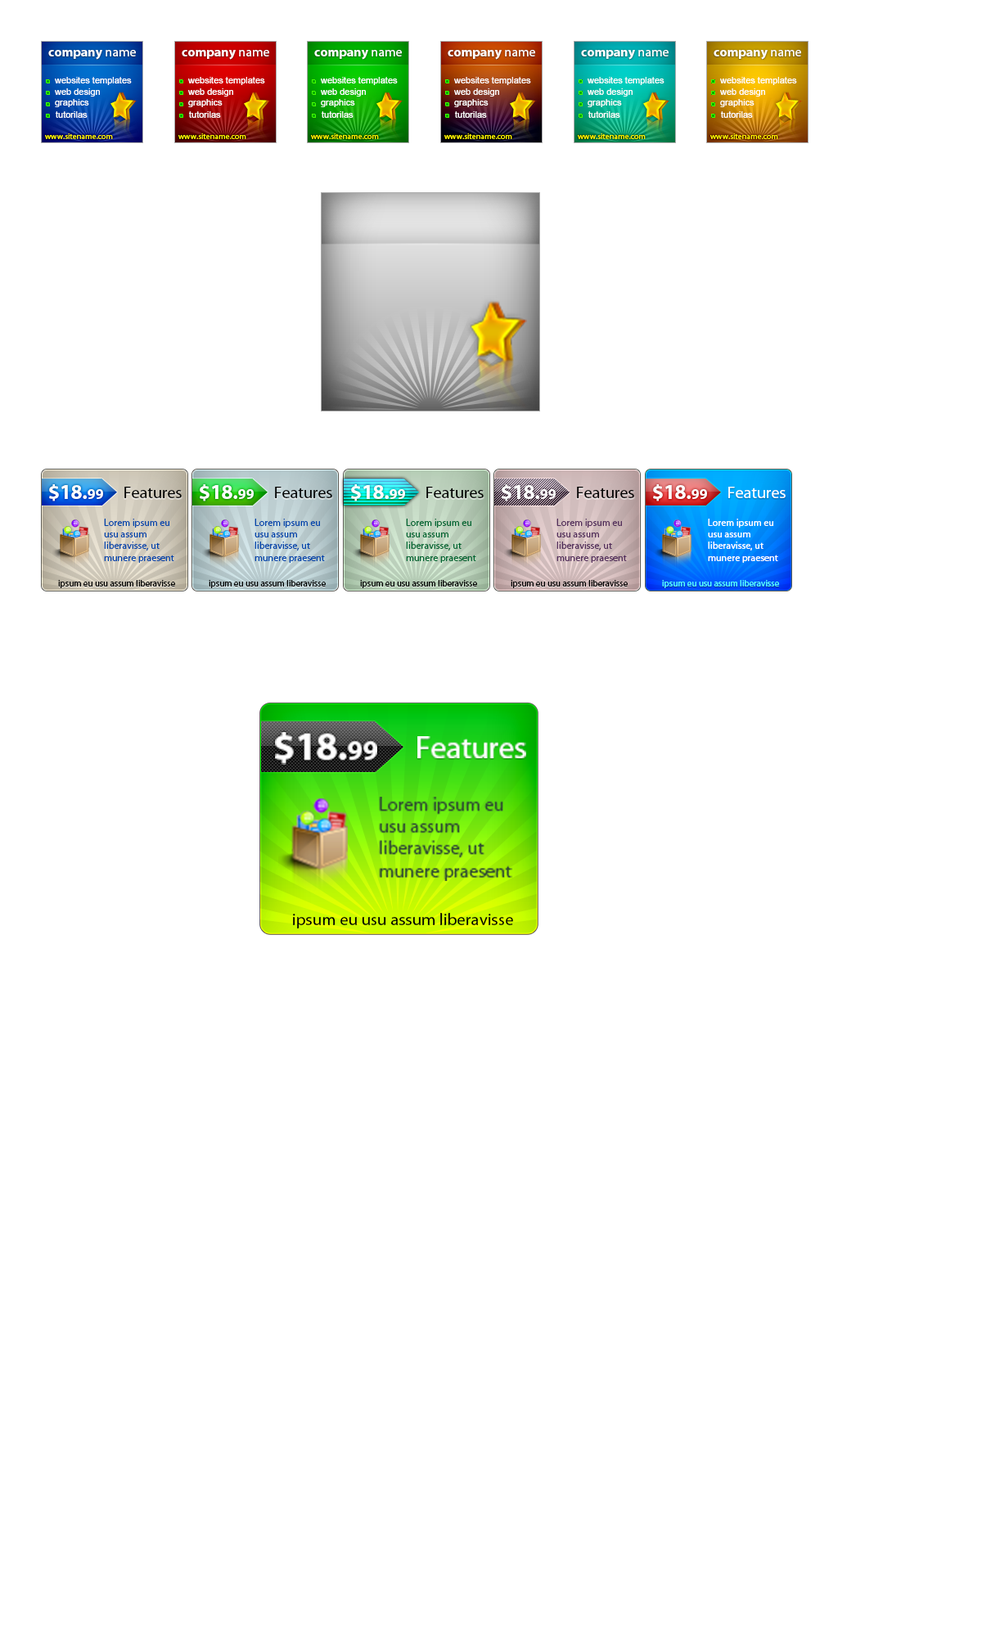
<style>
.page{position:relative;width:982px;height:1636px;background:#ffffff}
.page>*{position:absolute;margin:0}
.t1{font:13.1px "MyriadPro-Bold";color:#ffffff}
.t2{font:13.1px "MyriadPro-Regular";color:#ffffff}
.t3{font:9px "ArialMT";color:#ffffff}
.t4{font:8.2px "MyriadPro-Regular";color:#fff600}
.t5{font:20.5px "MyriadPro-Bold";color:#fefefe}
.t6{font:14.7px "MyriadPro-Bold";color:#fefefe}
.t7{font:16.4px "MyriadPro-Regular";color:#000000}
.t8{font:16.4px "MyriadPro-Regular";color:#ffffff}
.t9{font:9.8px "MyriadPro-Regular";color:#0145ab}
.t10{font:9.8px "MyriadPro-Regular";color:#006632}
.t11{font:9.8px "MyriadPro-Regular";color:#542f5c}
.t12{font:9.8px "MyriadPro-Regular";color:#ffffff}
.t13{font:9px "MyriadPro-Regular";color:#010101}
.t14{font:9px "MyriadPro-Regular";color:#56fdff}
.t15{font:38.7px "MyriadPro-Bold";color:#fefefe}
.t16{font:27.9px "MyriadPro-Bold";color:#fefefe}
.t17{font:31px "MyriadPro-Regular";color:#ffffff}
.t18{font:18.6px "MyriadPro-Regular";color:#2f4b2f}
.t19{font:17px "MyriadPro-Regular";color:#000000}
</style>
<div class="page">
<p class="t1" style="left:48px;top:50px;width:88px;height:10px">company<span class="t2"> name</span></p>
<p class="t1" style="left:182px;top:50px;width:87px;height:10px">company<span class="t2"> name</span></p>
<p class="t1" style="left:314px;top:50px;width:88px;height:10px">company<span class="t2"> name</span></p>
<p class="t1" style="left:448px;top:50px;width:87px;height:10px">company<span class="t2"> name</span></p>
<p class="t1" style="left:581px;top:50px;width:87px;height:10px">company<span class="t2"> name</span></p>
<p class="t1" style="left:713px;top:50px;width:88px;height:10px">company<span class="t2"> name</span></p>
<p class="t3" style="left:55px;top:77px;width:77px;height:8px">websites templates</p>
<p class="t3" style="left:188px;top:77px;width:77px;height:8px">websites templates</p>
<p class="t3" style="left:321px;top:77px;width:77px;height:8px">websites templates</p>
<p class="t3" style="left:454px;top:77px;width:77px;height:8px">websites templates</p>
<p class="t3" style="left:587px;top:77px;width:77px;height:8px">websites templates</p>
<p class="t3" style="left:720px;top:77px;width:77px;height:8px">websites templates</p>
<p class="t3" style="left:55px;top:88px;width:45px;height:9px">web design</p>
<p class="t3" style="left:188px;top:88px;width:45px;height:9px">web design</p>
<p class="t3" style="left:321px;top:88px;width:45px;height:9px">web design</p>
<p class="t3" style="left:454px;top:88px;width:45px;height:9px">web design</p>
<p class="t3" style="left:587px;top:88px;width:45px;height:9px">web design</p>
<p class="t3" style="left:720px;top:88px;width:45px;height:9px">web design</p>
<p class="t3" style="left:55px;top:99px;width:34px;height:8px">graphics</p>
<p class="t3" style="left:188px;top:99px;width:35px;height:8px">graphics</p>
<p class="t3" style="left:321px;top:99px;width:34px;height:8px">graphics</p>
<p class="t3" style="left:454px;top:99px;width:34px;height:8px">graphics</p>
<p class="t3" style="left:587px;top:99px;width:35px;height:8px">graphics</p>
<p class="t3" style="left:720px;top:99px;width:34px;height:8px">graphics</p>
<p class="t3" style="left:56px;top:111px;width:32px;height:7px">tutorilas</p>
<p class="t3" style="left:189px;top:111px;width:32px;height:7px">tutorilas</p>
<p class="t3" style="left:322px;top:111px;width:31px;height:7px">tutorilas</p>
<p class="t3" style="left:455px;top:111px;width:32px;height:7px">tutorilas</p>
<p class="t3" style="left:588px;top:111px;width:32px;height:7px">tutorilas</p>
<p class="t3" style="left:721px;top:111px;width:32px;height:7px">tutorilas</p>
<p class="t4" style="left:45px;top:133px;width:68px;height:6px">www.sitename.com</p>
<p class="t4" style="left:178px;top:133px;width:68px;height:6px">www.sitename.com</p>
<p class="t4" style="left:311px;top:133px;width:68px;height:6px">www.sitename.com</p>
<p class="t4" style="left:444px;top:133px;width:68px;height:6px">www.sitename.com</p>
<p class="t4" style="left:578px;top:133px;width:68px;height:6px">www.sitename.com</p>
<p class="t4" style="left:710px;top:133px;width:68px;height:6px">www.sitename.com</p>
<p class="t5" style="left:49px;top:484px;width:54px;height:18px">$18.<span class="t6">99</span></p>
<p class="t5" style="left:200px;top:484px;width:54px;height:18px">$18.<span class="t6">99</span></p>
<p class="t5" style="left:351px;top:484px;width:54px;height:18px">$18.<span class="t6">99</span></p>
<p class="t5" style="left:502px;top:484px;width:54px;height:18px">$18.<span class="t6">99</span></p>
<p class="t5" style="left:653px;top:484px;width:54px;height:18px">$18.<span class="t6">99</span></p>
<p class="t7" style="left:124px;top:487px;width:58px;height:11px">Features</p>
<p class="t7" style="left:275px;top:487px;width:57px;height:11px">Features</p>
<p class="t7" style="left:426px;top:487px;width:58px;height:11px">Features</p>
<p class="t7" style="left:577px;top:487px;width:57px;height:11px">Features</p>
<p class="t8" style="left:728px;top:487px;width:57px;height:11px">Features</p>
<p class="t9" style="left:104px;top:519px;width:70px;height:44px">Lorem ipsum eu usu assum liberavisse, ut munere praesent</p>
<p class="t9" style="left:254px;top:519px;width:71px;height:44px">Lorem ipsum eu usu assum liberavisse, ut munere praesent</p>
<p class="t10" style="left:406px;top:519px;width:70px;height:44px">Lorem ipsum eu usu assum liberavisse, ut munere praesent</p>
<p class="t11" style="left:556px;top:519px;width:71px;height:44px">Lorem ipsum eu usu assum liberavisse, ut munere praesent</p>
<p class="t12" style="left:708px;top:519px;width:70px;height:44px">Lorem ipsum eu usu assum liberavisse, ut munere praesent</p>
<p class="t13" style="left:58px;top:580px;width:117px;height:8px">ipsum eu usu assum liberavisse</p>
<p class="t13" style="left:209px;top:580px;width:117px;height:8px">ipsum eu usu assum liberavisse</p>
<p class="t13" style="left:360px;top:580px;width:117px;height:8px">ipsum eu usu assum liberavisse</p>
<p class="t13" style="left:511px;top:580px;width:117px;height:8px">ipsum eu usu assum liberavisse</p>
<p class="t14" style="left:662px;top:580px;width:117px;height:8px">ipsum eu usu assum liberavisse</p>
<p class="t15" style="left:275px;top:732px;width:102px;height:33px">$18.<span class="t16">99</span></p>
<p class="t17" style="left:417px;top:736px;width:109px;height:22px">Features</p>
<p class="t18" style="left:379px;top:797px;width:133px;height:84px">Lorem ipsum eu usu assum liberavisse, ut munere praesent</p>
<p class="t19" style="left:293px;top:913px;width:220px;height:16px">ipsum eu usu assum liberavisse</p>
</div>
